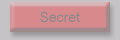
<style>
.page{position:relative;width:120px;height:40px;background:#d7898b}
.page>*{position:absolute;margin:0}
.t1{font:14px "ArialMT";color:#8b898b}
</style>
<div class="page">
<p class="t1" style="left:40px;top:11px;width:40px;height:12px">Secret</p>
</div>
